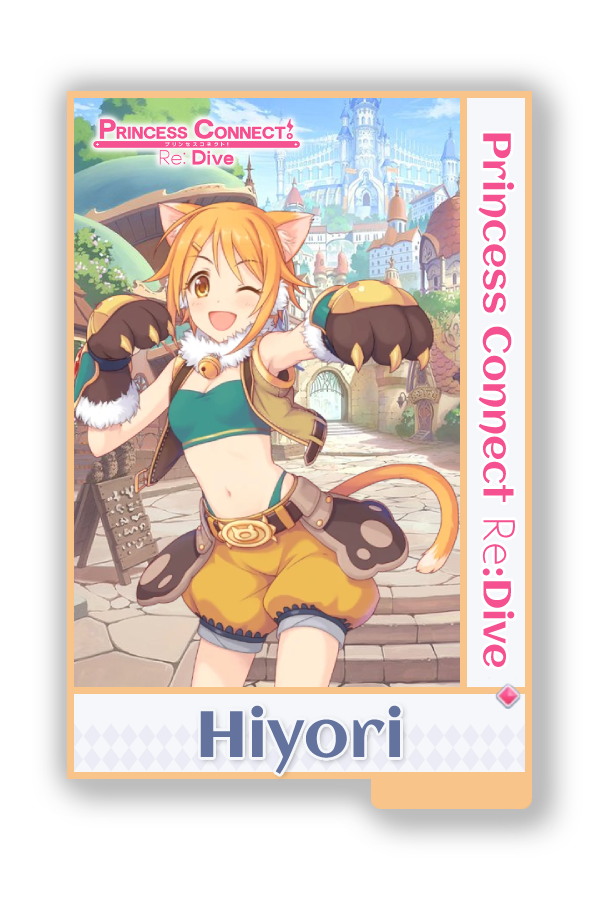
<style>
.page{position:relative;width:600px;height:900px;background:#ffffff}
.page>*{position:absolute;margin:0}
.t1{font:39px "Aclonica-Regular";color:#f55191}
.t2{font:39px "AaarghNormal";color:#f55191}
.t3{font:65px "Aclonica-Regular";color:#64739d}
</style>
<div class="page">
<p class="t1" style="left:478px;top:133px;width:38px;height:534px;rotate:90deg">Princess Connect <span class="t2">Re</span>:Dive</p>
<p class="t3" style="left:200px;top:705px;width:201px;height:69px">Hiyori</p>
</div>
